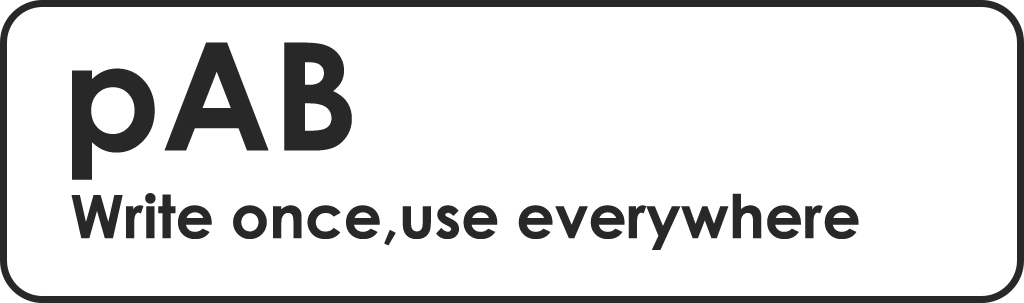
<style>
.page{position:relative;width:1024px;height:303px;background:#ffffff}
.page>*{position:absolute;margin:0}
.t1{font:150px "CenturyGothic-Bold";color:#282828}
.t2{font:60px "CenturyGothic-Bold";color:#282828}
</style>
<div class="page">
<p class="t1" style="left:72px;top:42px;width:280px;height:138px">pAB</p>
<p class="t2" style="left:71px;top:193px;width:788px;height:57px">Write once,use everywhere</p>
</div>
